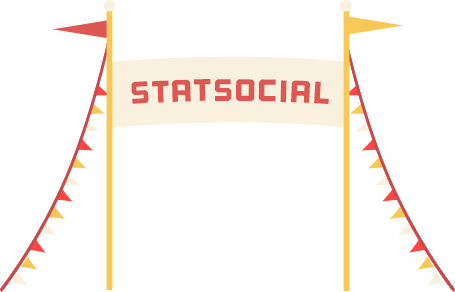
<style>
.page{position:relative;width:455px;height:292px;background:#ffffff}
.page>*{position:absolute;margin:0}
.t1{font:31px "Outage-Regular";color:#dd5754}
</style>
<div class="page">
<p class="t1" style="left:131px;top:79px;width:198px;height:25px">STATSOCIAL</p>
</div>
